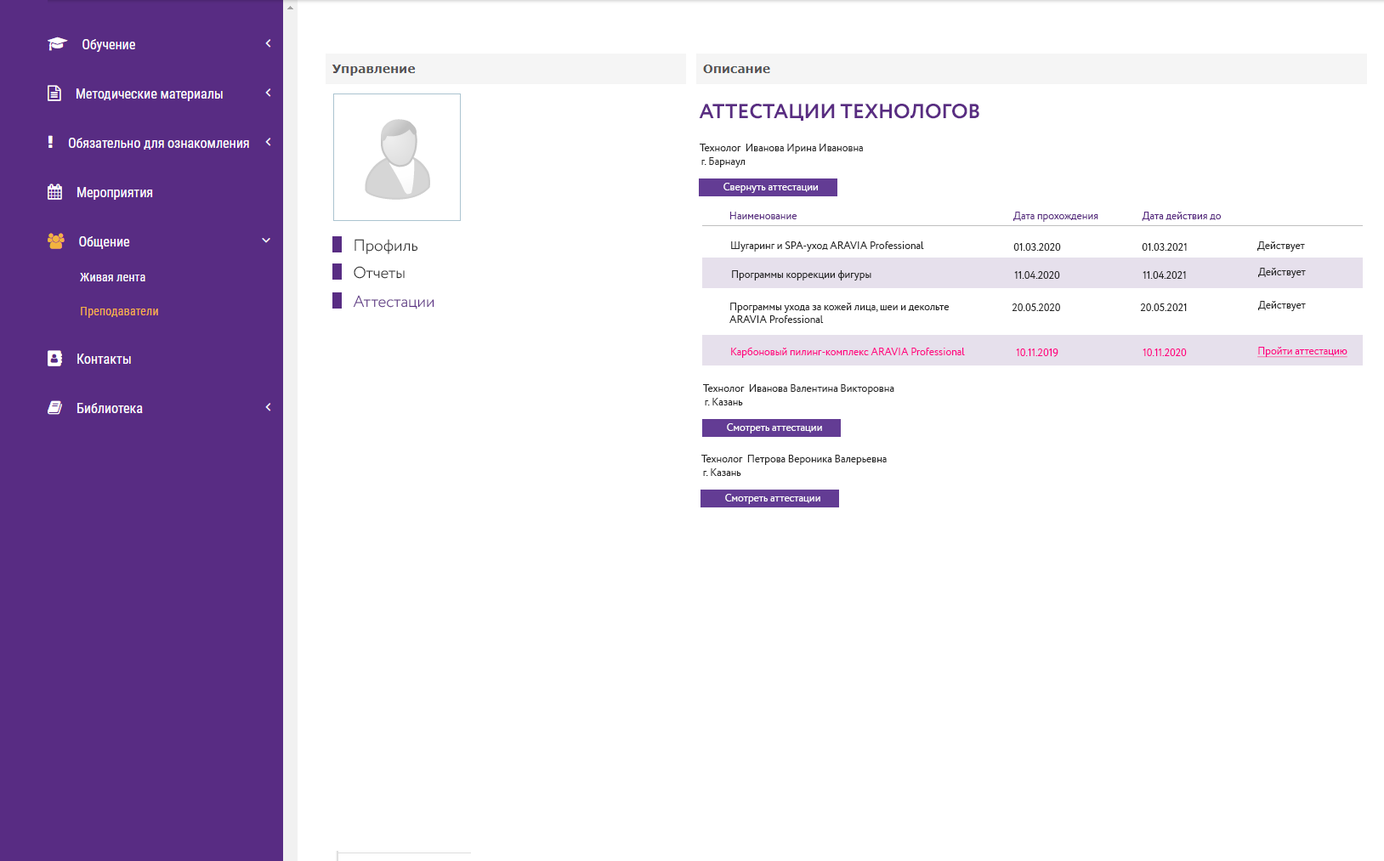
<style>
.page{position:relative;width:1384px;height:861px;background:#ffffff}
.page>*{position:absolute;margin:0}
.t1{font:20.4px "Circe-Bold";color:#592c82;text-transform:uppercase}
.t2{font:10.2px "Circe-Regular";color:#272727}
.t3{font:10.2px "Circe-Regular";color:#ffffff}
.t4{font:10.2px "Circe-Regular";color:#592c81}
.t5{font:15.9px "Circe-Light";color:#272727}
.t6{font:15.9px "Circe-Light";color:#592c82}
.t7{font:10.2px "Circe-Regular";color:#ff0081}
.t8{font:10.2px "Circe-Regular";color:#ff0081;text-decoration:underline}
</style>
<div class="page">
<p class="t1" style="left:699px;top:104px;width:281px;height:17px">аттестации технологов</p>
<p class="t2" style="left:700px;top:144px;width:163px;height:10px">Технолог  Иванова Ирина Ивановна</p>
<p class="t2" style="left:702px;top:157px;width:44px;height:11px">г. Барнаул</p>
<p class="t3" style="left:724px;top:183px;width:94px;height:10px">Свернуть аттестации</p>
<p class="t4" style="left:730px;top:212px;width:68px;height:7px">Наименование</p>
<p class="t4" style="left:1014px;top:212px;width:85px;height:10px">Дата прохождения</p>
<p class="t4" style="left:1142px;top:212px;width:80px;height:9px">Дата действия до</p>
<p class="t5" style="left:355px;top:239px;width:63px;height:15px">Профиль</p>
<p class="t2" style="left:731px;top:241px;width:193px;height:11px">Шугаринг и SPA-уход ARAVIA Professional</p>
<p class="t2" style="left:1014px;top:243px;width:47px;height:8px">01.03.2020</p>
<p class="t2" style="left:1142px;top:243px;width:45px;height:8px">01.03.2021</p>
<p class="t2" style="left:1258px;top:241px;width:47px;height:11px">Действует</p>
<p class="t5" style="left:354px;top:266px;width:51px;height:13px">Отчеты</p>
<p class="t2" style="left:1258px;top:268px;width:48px;height:10px">Действует</p>
<p class="t2" style="left:732px;top:270px;width:140px;height:11px">Программы коррекции фигуры</p>
<p class="t2" style="left:1014px;top:271px;width:46px;height:8px">11.04.2020</p>
<p class="t2" style="left:1143px;top:271px;width:43px;height:8px">11.04.2021</p>
<p class="t6" style="left:353px;top:295px;width:82px;height:15px">Аттестации</p>
<p class="t2" style="left:730px;top:303px;width:220px;height:20px">Программы ухода за кожей лица, шеи и декольте <br>ARAVIA Professional</p>
<p class="t2" style="left:1012px;top:304px;width:48px;height:7px">20.05.2020</p>
<p class="t2" style="left:1140px;top:304px;width:47px;height:7px">20.05.2021</p>
<p class="t2" style="left:1258px;top:301px;width:48px;height:10px">Действует</p>
<p class="t7" style="left:731px;top:347px;width:234px;height:11px">Карбоновый пилинг-комплекс ARAVIA Professional</p>
<p class="t7" style="left:1016px;top:349px;width:43px;height:8px">10.11.2019</p>
<p class="t7" style="left:1143px;top:349px;width:44px;height:7px">10.11.2020</p>
<p class="t8" style="left:1258px;top:347px;width:90px;height:11px">Пройти аттестацию</p>
<p class="t2" style="left:703px;top:384px;width:192px;height:11px">Технолог  Иванова Валентина Викторовна</p>
<p class="t2" style="left:705px;top:398px;width:38px;height:8px">г. Казань</p>
<p class="t3" style="left:727px;top:423px;width:95px;height:11px">Смотреть аттестации</p>
<p class="t2" style="left:702px;top:455px;width:185px;height:10px">Технолог  Петрова Вероника Валерьевна</p>
<p class="t2" style="left:703px;top:469px;width:38px;height:7px">г. Казань</p>
<p class="t3" style="left:725px;top:494px;width:96px;height:10px">Смотреть аттестации</p>
</div>
